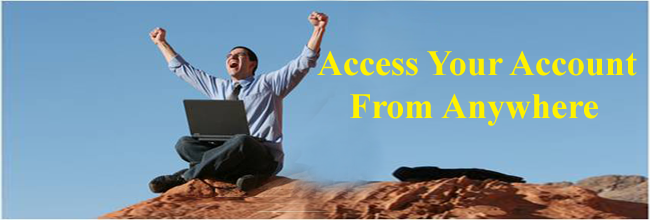
<style>
.page{position:relative;width:650px;height:220px}
.page>*{position:absolute;margin:0}
.t1{font:36px "TimesNewRomanPS-BoldMT";color:#fff200}
</style>
<div class="page">
<p class="t1" style="left:317px;top:50px;width:320px;height:26px">Access Your Account</p>
<p class="t1" style="left:350px;top:93px;width:248px;height:33px">From Anywhere</p>
</div>
